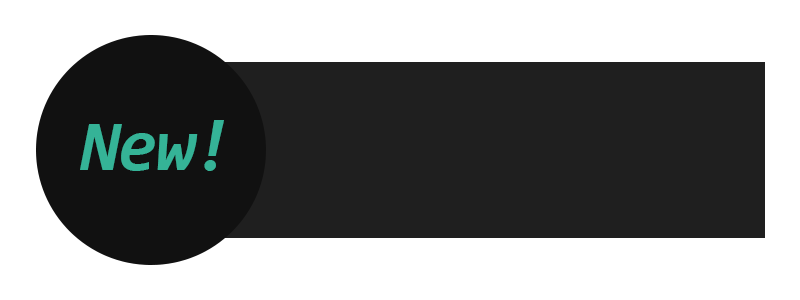
<style>
.page{position:relative;width:800px;height:300px;background:#ffffff}
.page>*{position:absolute;margin:0}
.t1{font:72px "Consolas-BoldItalic";letter-spacing:-0.025em;color:#35b397}
</style>
<div class="page">
<p class="t1" style="left:80px;top:120px;width:144px;height:51px">New!</p>
</div>
